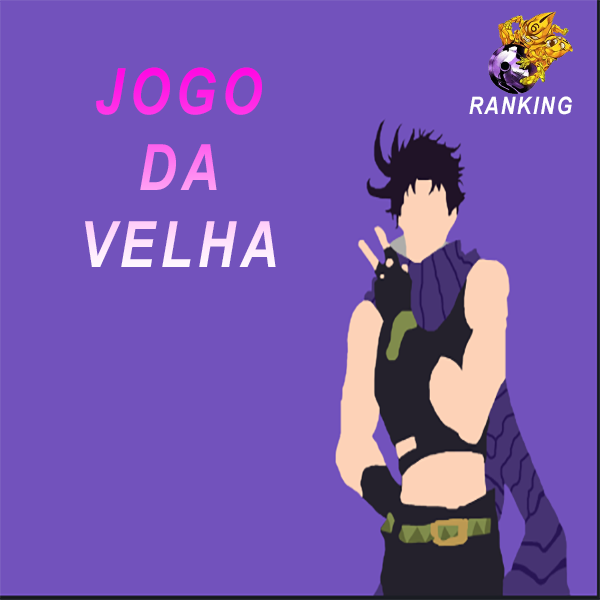
<style>
.page{position:relative;width:600px;height:600px;background:#7252bc}
.page>*{position:absolute;margin:0}
.t1{font:64px "ArialNarrow-BoldItalic";letter-spacing:0.08em;text-transform:uppercase}
.t2{font:24px "ArialNarrow-BoldItalic";letter-spacing:0.08em;color:#ffffff;text-transform:uppercase}
</style>
<div class="page">
<p class="t1" style="left:85px;top:67px;width:191px;height:200px;text-align:center">Jogo <br>Da <br>Velha</p>
<p class="t2" style="left:469px;top:96px;width:103px;height:19px">ranking</p>
</div>
